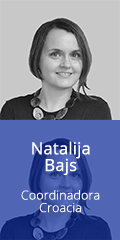
<style>
.page{position:relative;width:120px;height:240px;background:#c8c8c8}
.page>*{position:absolute;margin:0}
.t1{font:16.7px/16.7px "OpenSans";letter-spacing:0.01em;color:#ffffff}
.t2{font:12.5px/12.5px "OpenSans-Light";letter-spacing:0.01em;color:#ffffff}
</style>
<div class="page">
<p class="t1" style="left:32px;top:141px;width:58px;height:35px;text-align:center">Natalija<br>Bajs</p>
<p class="t2" style="left:21px;top:190px;width:79px;height:23px;text-align:center">Coordinadora<br>Croacia</p>
</div>
